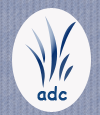
<style>
.page{position:relative;width:100px;height:115px;background:#f8f6f7}
.page>*{position:absolute;margin:0}
.t1{font:18px "ComicSansMS";color:#11457e;font-weight:bold}
</style>
<div class="page">
<p class="t1" style="left:37px;top:86px;width:30px;height:15px">adc</p>
</div>
